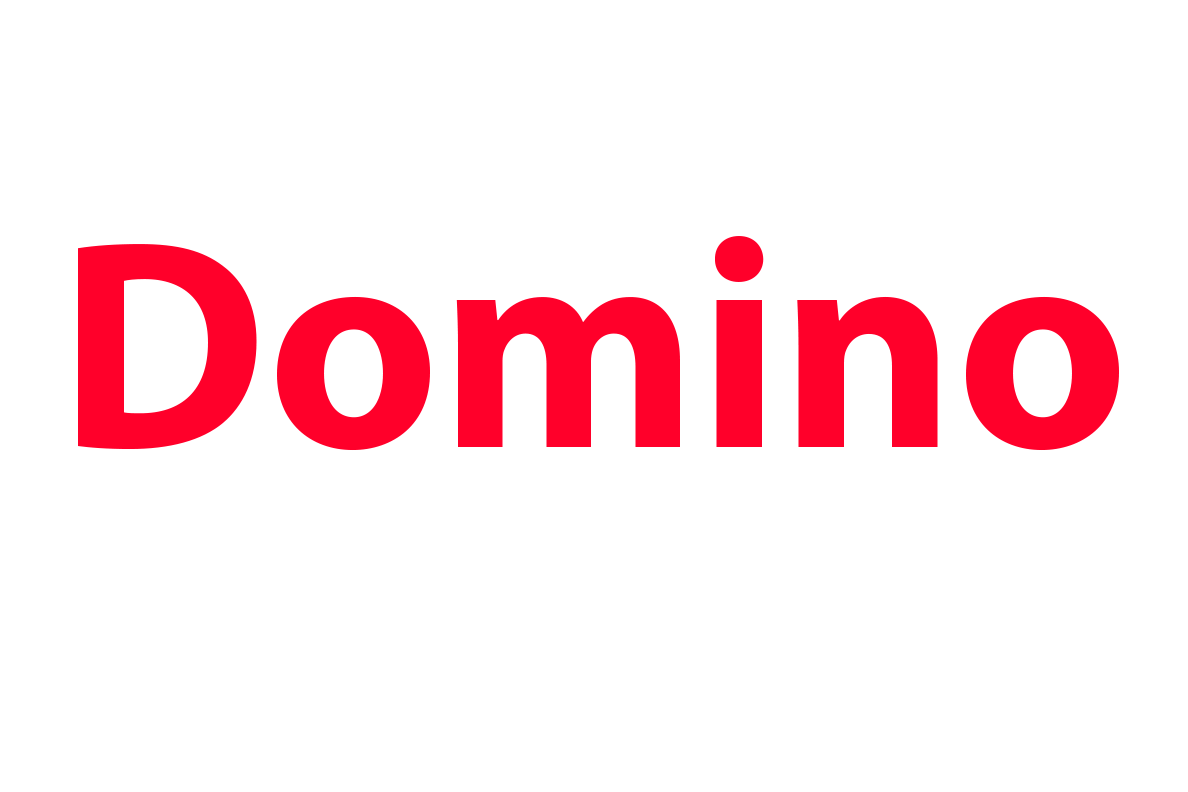
<style>
.page{position:relative;width:1188px;height:792px;background:#ffffff}
.page>*{position:absolute;margin:0}
.t1{font:300px "MyriadPro-Bold";color:#ff002a}
</style>
<div class="page">
<p class="t1" style="left:78px;top:236px;width:1041px;height:215px">Domino</p>
</div>
